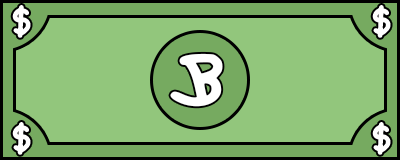
<style>
.page{position:relative;width:400px;height:160px;background:#92c67c}
.page>*{position:absolute;margin:0}
.t1{font:50.8px "Brutal_bounce-Regular";color:#ffffff}
.t2{font:101.6px "Brutal_bounce-Regular";color:#ffffff}
</style>
<div class="page">
<p class="t1" style="left:12px;top:5px;width:19px;height:33px">$</p>
<p class="t1" style="left:372px;top:5px;width:19px;height:33px">$</p>
<p class="t2" style="left:170px;top:53px;width:53px;height:54px">B</p>
<p class="t1" style="left:12px;top:122px;width:19px;height:33px">$</p>
<p class="t1" style="left:372px;top:122px;width:19px;height:33px">$</p>
</div>
